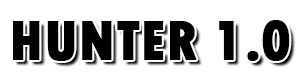
<style>
.page{position:relative;width:300px;height:75px;background:#ffffff}
.page>*{position:absolute;margin:0}
.t1{font:58.3px "TwCenMT-CondensedExtraBold";color:#000000;font-weight:bold}
</style>
<div class="page">
<p class="t1" style="left:13px;top:20px;width:277px;height:41px">HUNTER 1.0</p>
</div>
